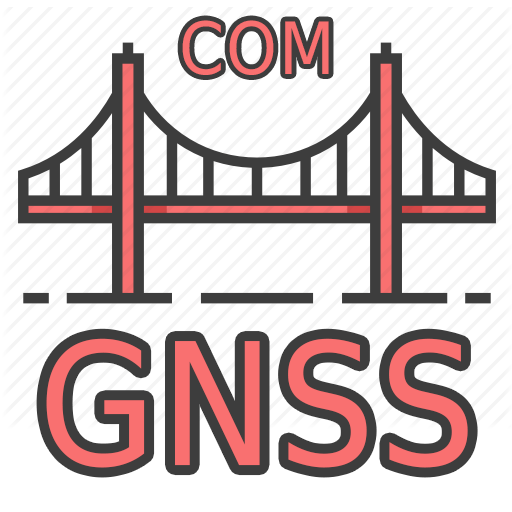
<style>
.page{position:relative;width:512px;height:512px;background:#ffffff}
.page>*{position:absolute;margin:0}
.t1{font:72px "DejaVuSansCondensed";letter-spacing:0.02em;color:#f97070}
.t2{font:170px "DejaVuSansCondensed";letter-spacing:0.02em;color:#f97070}
</style>
<div class="page">
<p class="t1" style="left:182px;top:20px;width:147px;height:55px">COM</p>
<p class="t2" style="left:46px;top:338px;width:422px;height:130px">GNSS</p>
</div>
